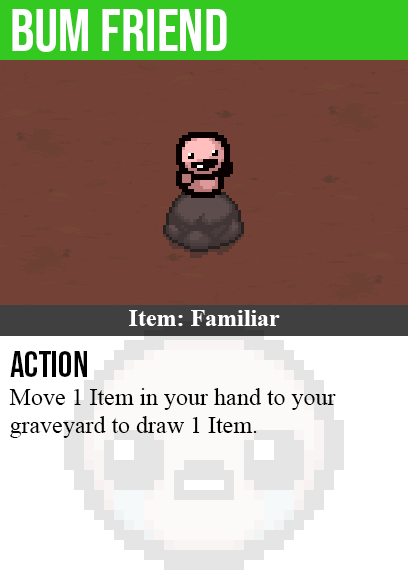
<style>
.page{position:relative;width:408px;height:585px;background:#734136}
.page>*{position:absolute;margin:0}
.t1{font:60px "BebasNeue-Regular";color:#ffffff}
.t2{font:24px "TimesNewRomanPS-BoldMT";color:#ffffff}
.t3{font:36px "BebasNeue-Regular";color:#000000}
.t4{font:24px "TimesNewRomanPSMT";color:#000000}
</style>
<div class="page">
<p class="t1" style="left:12px;top:9px;width:215px;height:43px">bum friend</p>
<p class="t2" style="left:129px;top:310px;width:151px;height:16px">Item: Familiar</p>
<p class="t3" style="left:10px;top:351px;width:77px;height:26px">action</p>
<p class="t4" style="left:9px;top:388px;width:327px;height:50px">Move 1 Item in your hand to your<br>graveyard to draw 1 Item.</p>
</div>
